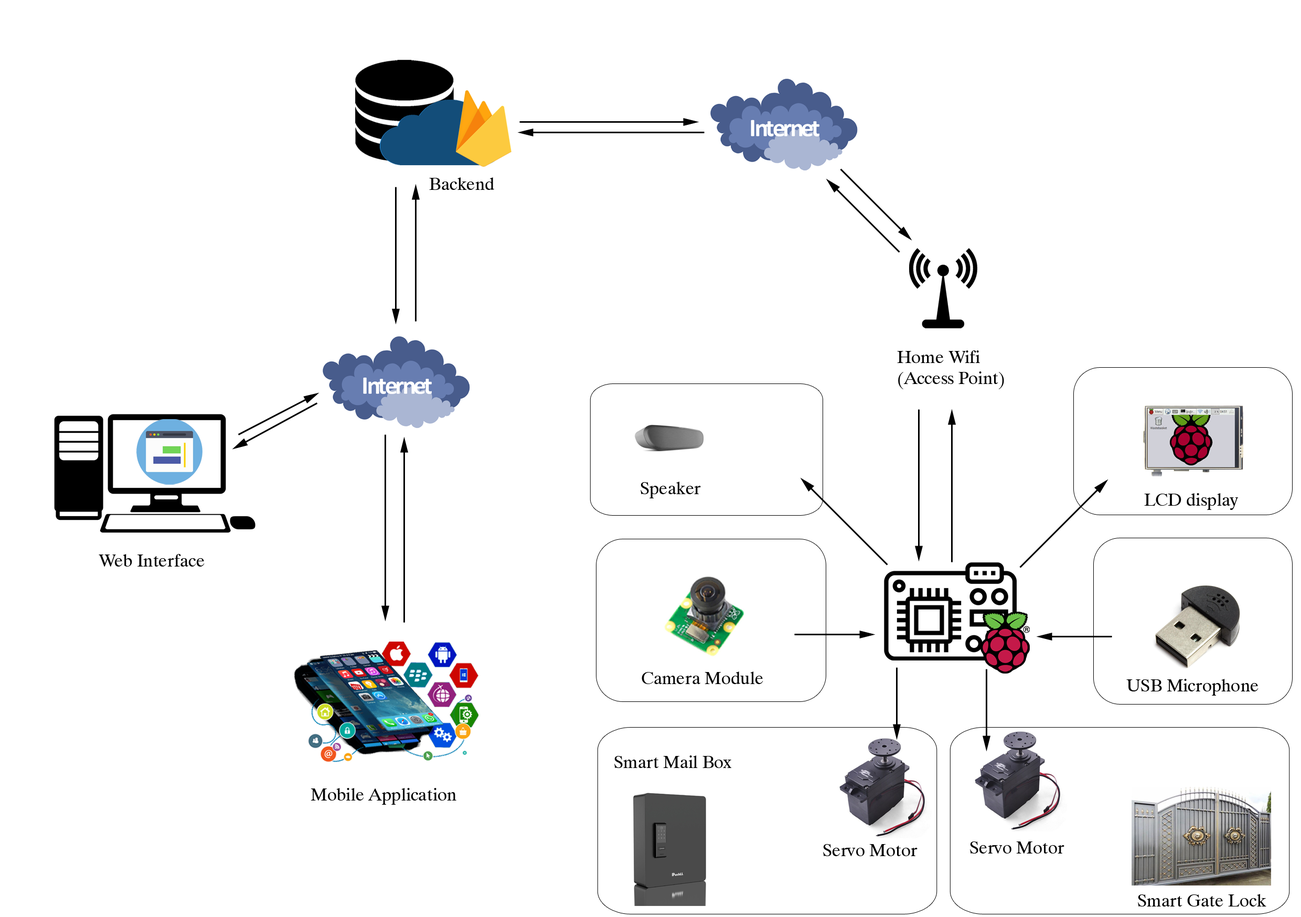
<style>
.page{position:relative;width:1301px;height:917px;background:#ffffff}
.page>*{position:absolute;margin:0}
.t1{font:17.5px "Dutch801BT-Roman";color:#000000}
</style>
<div class="page">
<p class="t1" style="left:429px;top:177px;width:65px;height:13px">Backend</p>
<p class="t1" style="left:897px;top:350px;width:107px;height:39px">Home Wifi<br>(Access Point)</p>
<p class="t1" style="left:640px;top:481px;width:61px;height:17px">Speaker</p>
<p class="t1" style="left:1144px;top:493px;width:94px;height:17px">LCD display</p>
<p class="t1" style="left:99px;top:554px;width:106px;height:12px">Web Interface</p>
<p class="t1" style="left:641px;top:671px;width:122px;height:13px">Camera Module</p>
<p class="t1" style="left:1126px;top:679px;width:132px;height:16px">USB Microphone</p>
<p class="t1" style="left:614px;top:755px;width:117px;height:13px">Smart Mail Box</p>
<p class="t1" style="left:310px;top:788px;width:146px;height:17px">Mobile Application</p>
<p class="t1" style="left:823px;top:844px;width:94px;height:12px">Servo Motor</p>
<p class="t1" style="left:970px;top:841px;width:94px;height:12px">Servo Motor</p>
<p class="t1" style="left:1138px;top:894px;width:128px;height:12px">Smart Gate Lock</p>
</div>
